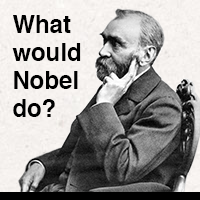
<style>
.page{position:relative;width:200px;height:200px}
.page>*{position:absolute;margin:0}
.t1{font:24px/28px "Helvetica-Bold";color:#000000}
</style>
<div class="page">
<p class="t1" style="left:12px;top:15px;width:69px;height:102px">What<br>would<br>Nobel<br>do?</p>
</div>
